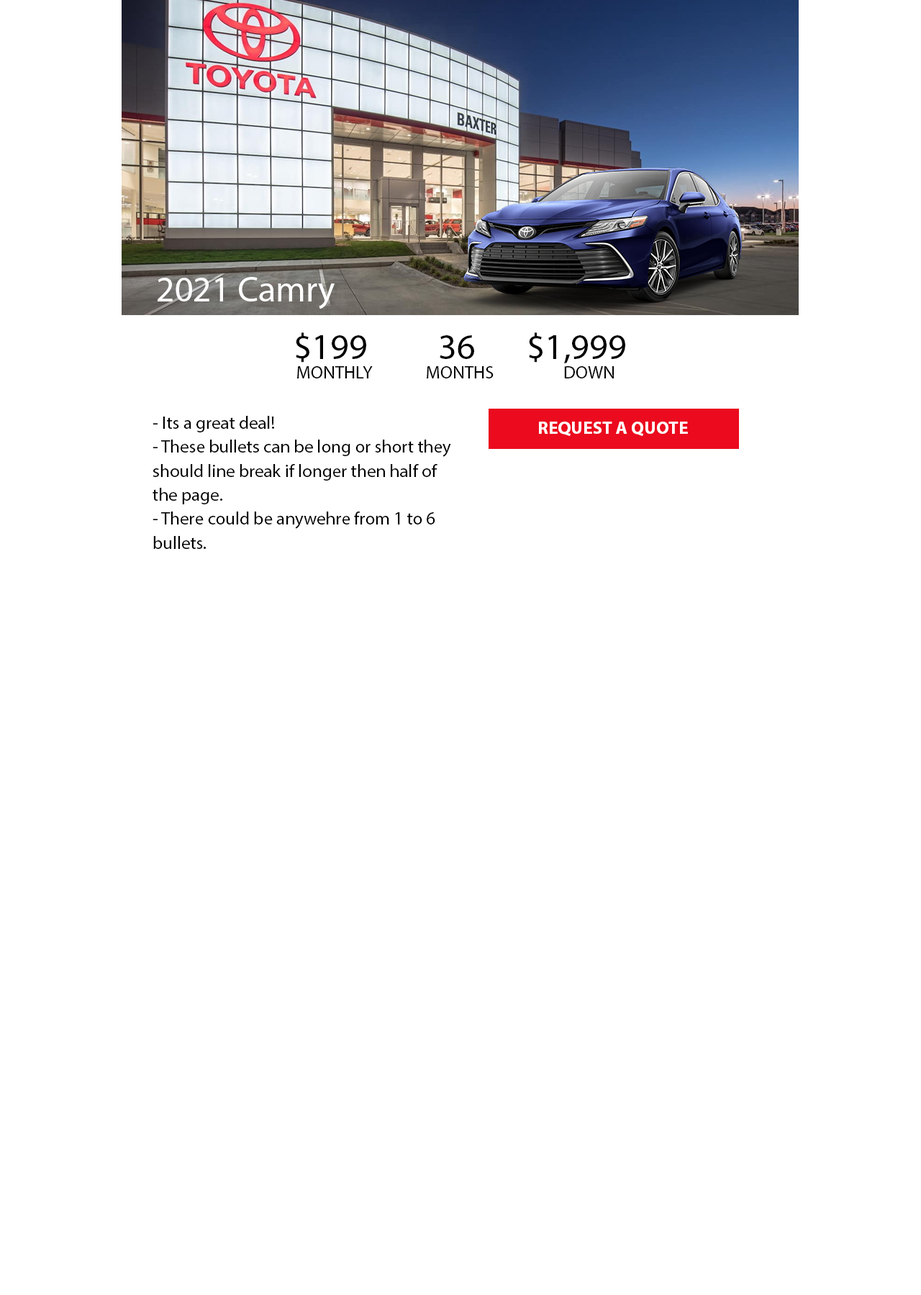
<style>
.page{position:relative;width:921px;height:1295px;background:#ffffff}
.page>*{position:absolute;margin:0}
.t1{font:36px "MyriadPro-Regular";color:#ffffff}
.t2{font:36px "MyriadPro-Regular";color:#000000}
.t3{font:18px "MyriadPro-Regular";color:#000000}
.t4{font:18px/24px "MyriadPro-Regular";color:#000000}
.t5{font:17.9px "MyriadPro-Bold";color:#ffffff}
</style>
<div class="page">
<p class="t1" style="left:158px;top:277px;width:177px;height:32px">2021 Camry</p>
<p class="t2" style="left:296px;top:332px;width:329px;height:31px">$199     36  $1,999</p>
<p class="t3" style="left:297px;top:366px;width:76px;height:12px">MONTHLY</p>
<p class="t3" style="left:427px;top:366px;width:67px;height:12px">MONTHS</p>
<p class="t3" style="left:564px;top:366px;width:50px;height:12px">DOWN</p>
<p class="t4" style="left:153px;top:416px;width:298px;height:133px">- Its a great deal!<br>- These bullets can be long or short they <br>should line break if longer then half of <br>the page.<br>- There could be anywehre from 1 to 6 <br>bullets.</p>
<p class="t5" style="left:539px;top:422px;width:149px;height:14px">REQUEST A QUOTE</p>
</div>
